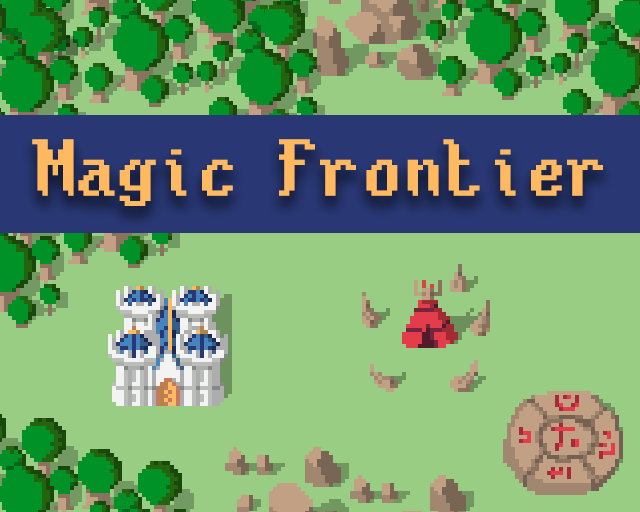
<style>
.page{position:relative;width:640px;height:512px;background:#99cd83}
.page>*{position:absolute;margin:0}
.t1{font:66.9px "Gold-Box-8x16-Monospaced";color:#ffb961}
</style>
<div class="page">
<p class="t1" style="left:32px;top:139px;width:571px;height:67px">Magic Frontier</p>
</div>
